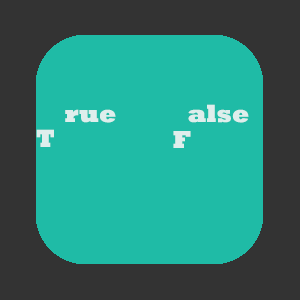
<style>
.page{position:relative;width:300px;height:300px;background:#1fbba6}
.page>*{position:absolute;margin:0}
.t1{font:25px "Rockwell-ExtraBold";color:#deeeec}
</style>
<div class="page">
<p class="t1" style="left:65px;top:109px;width:51px;height:14px">rue</p>
<p class="t1" style="left:188px;top:104px;width:61px;height:19px">alse</p>
<p class="t1" style="left:36px;top:129px;width:18px;height:18px">T</p>
<p class="t1" style="left:173px;top:131px;width:18px;height:17px">F</p>
</div>
